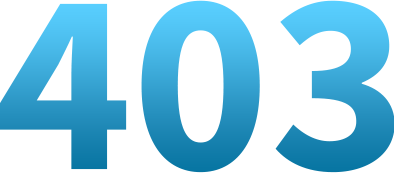
<style>
.page{position:relative;width:394px;height:173px;background:#ffffff}
.page>*{position:absolute;margin:0}
.t1{font:260px "SourceSans3Roman-Bold"}
</style>
<div class="page">
<p class="t1" style="left:0px;top:0px;width:395px;height:173px">403</p>
</div>
